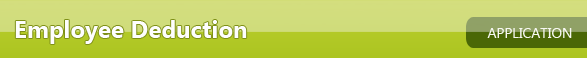
<style>
.page{position:relative;width:587px;height:58px}
.page>*{position:absolute;margin:0}
.t1{font:24px "SegoeUI-Bold";color:#fefefe}
.t2{font:14px "SegoeUI";color:#f6f7f1}
</style>
<div class="page">
<p class="t1" style="left:15px;top:20px;width:232px;height:24px">Employee Deduction</p>
<p class="t2" style="left:487px;top:28px;width:85px;height:10px">APPLICATION</p>
</div>
